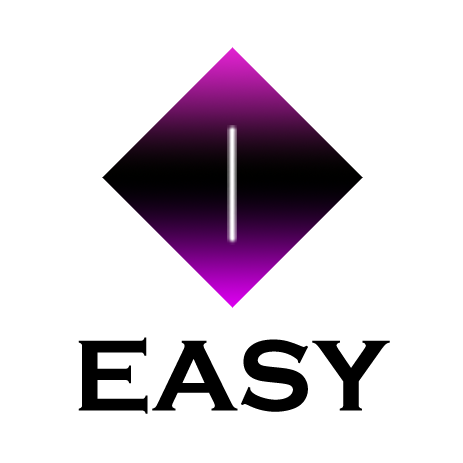
<style>
.page{position:relative;width:463px;height:463px;background:#ffffff}
.page>*{position:absolute;margin:0}
.t1{font:104.4px "CopperplateGothic-Bold";color:#000000}
</style>
<div class="page">
<p class="t1" style="left:78px;top:337px;width:312px;height:77px">EASY</p>
</div>
